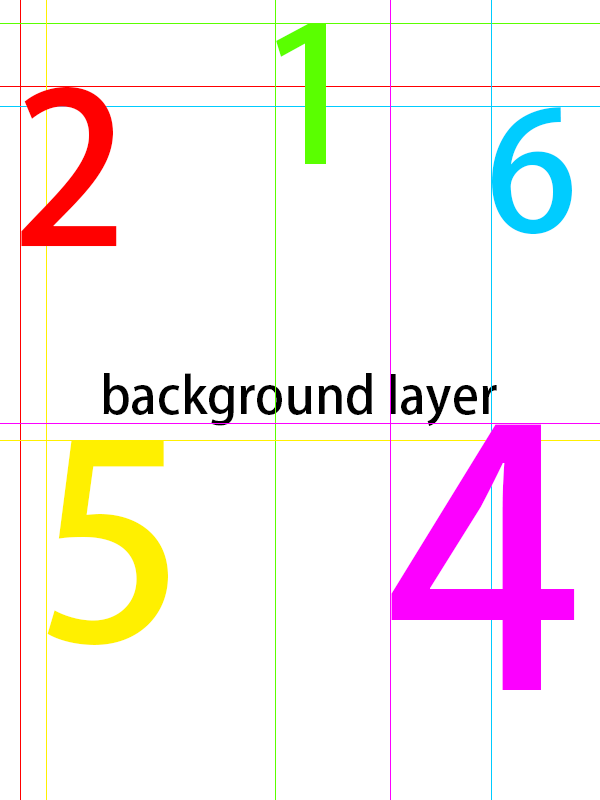
<style>
.page{position:relative;width:600px;height:800px;background:#ffffff}
.page>*{position:absolute;margin:0}
.t1{font:186.1px "AdobeHeitiStd-Regular";color:#5aff00}
.t2{font:207.4px "AdobeHeitiStd-Regular";color:#ff0000}
.t3{font:163px "AdobeHeitiStd-Regular";color:#00ccff}
.t4{font:352.3px "AdobeHeitiStd-Regular";color:#fc00ff}
.t5{font:266.8px "AdobeHeitiStd-Regular";color:#fff000}
</style>
<div class="page">
<p class="t1" style="left:276px;top:24px;width:50px;height:140px">1</p>
<p class="t2" style="left:21px;top:87px;width:96px;height:160px">2</p>
<p class="t3" style="left:492px;top:107px;width:80px;height:127px">6</p>
<p class="t4" style="left:391px;top:424px;width:184px;height:266px">4</p>
<p class="t5" style="left:47px;top:441px;width:121px;height:204px">5</p>
</div>
